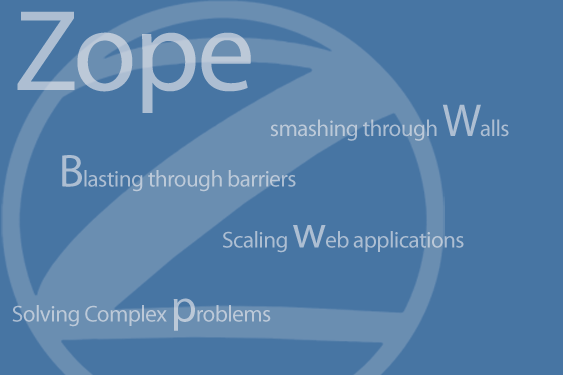
<style>
.page{position:relative;width:563px;height:375px;background:#4775a3}
.page>*{position:absolute;margin:0}
.t1{font:115.8px "MyriadPro-Regular";letter-spacing:-0.025em;color:#adbed2}
.t2{font:23.2px "MyriadPro-Regular";letter-spacing:-0.025em;color:#adbed2}
.t3{font:46.3px "MyriadPro-Regular";letter-spacing:-0.025em;color:#adbed2}
.t4{font:23.2px "MyriadPro-Regular";letter-spacing:-0.025em;color:#bcc9d8}
.t5{font:46.3px "MyriadPro-Regular";letter-spacing:-0.025em;color:#bcc9d8}
</style>
<div class="page">
<p class="t1" style="left:17px;top:11px;width:234px;height:102px">Zope</p>
<p class="t2" style="left:62px;top:155px;width:234px;height:37px"><span class="t3">B</span>lasting through barriers</p>
<p class="t2" style="left:223px;top:225px;width:241px;height:28px">Scaling <span class="t3">w</span>eb applications</p>
<p class="t4" style="left:12px;top:298px;width:259px;height:33px">Solving Complex <span class="t5">p</span>roblems</p>
</div>
